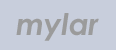
<style>
.page{position:relative;width:116px;height:50px;background:#c8cedc}
.page>*{position:absolute;margin:0}
.t1{font:30px "CenturyGothic-BoldItalic";color:#9b9b9b}
</style>
<div class="page">
<p class="t1" style="left:16px;top:13px;width:83px;height:28px">mylar</p>
</div>
